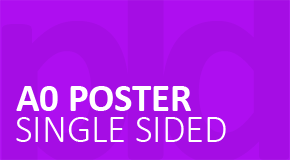
<style>
.page{position:relative;width:290px;height:160px;background:#a50de4}
.page>*{position:absolute;margin:0}
.t1{font:38.8px "Calibri-Bold";color:#ffffff}
.t2{font:38.8px "Calibri-Light";color:#ffffff}
</style>
<div class="page">
<p class="t1" style="left:16px;top:86px;width:175px;height:25px">A0 POSTER</p>
<p class="t2" style="left:16px;top:117px;width:210px;height:25px">SINGLE SIDED</p>
</div>
